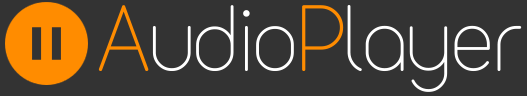
<style>
.page{position:relative;width:527px;height:96px;background:#333333}
.page>*{position:absolute;margin:0}
.t1{font:108.3px "MAXWELLLIGHT";letter-spacing:-0.02em;color:#ffffff}
.t2{font:108.3px "MAXWELLLIGHT";letter-spacing:-0.02em;color:#ff8c00}
</style>
<div class="page">
<p class="t1" style="left:98px;top:5px;width:424px;height:87px"><span class="t2">A</span>udio<span class="t2">P</span>layer</p>
</div>
